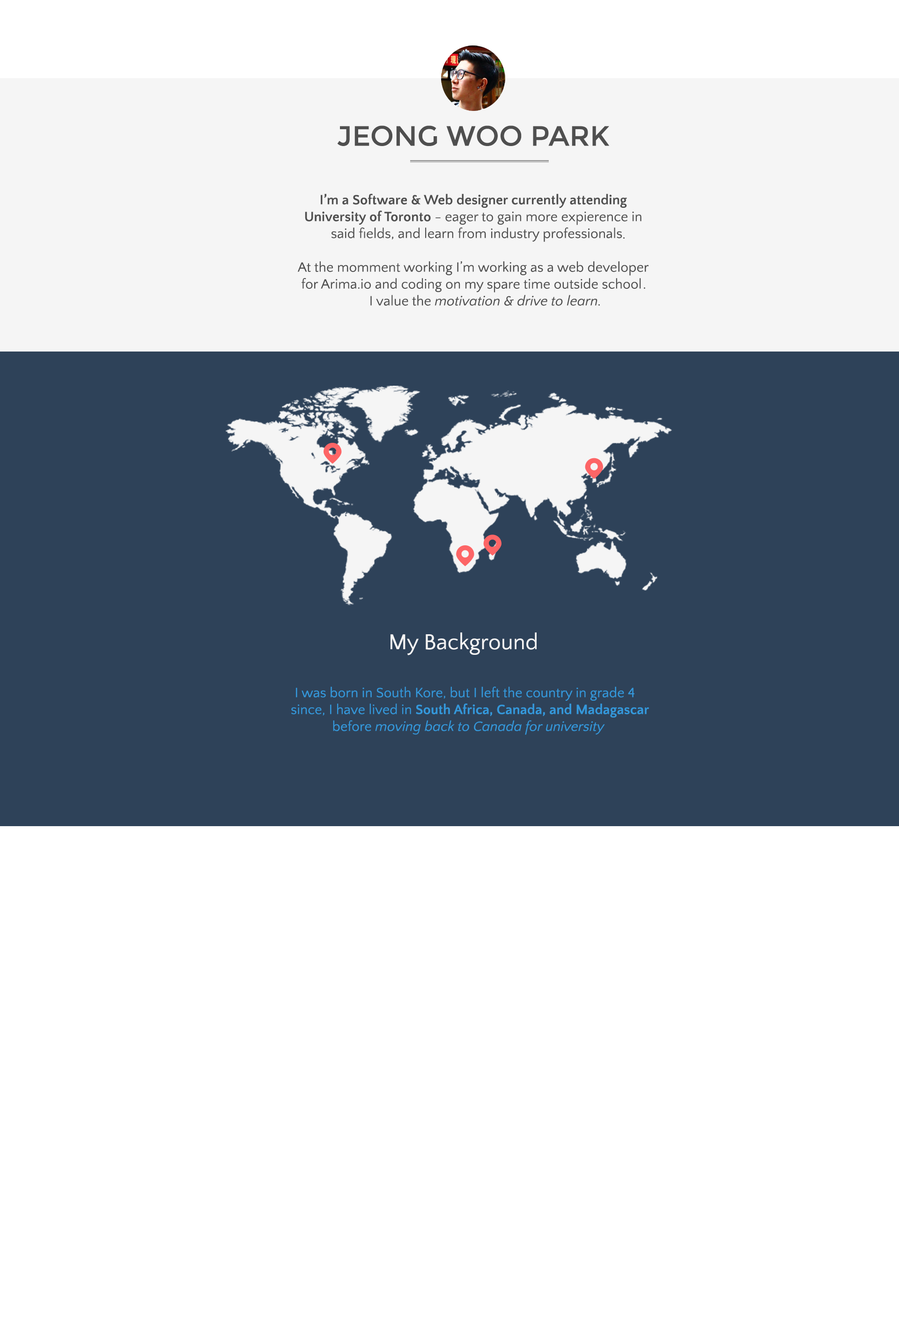
<style>
.page{position:relative;width:899px;height:1327px;background:#ffffff}
.page>*{position:absolute;margin:0}
.t1{font:28.1px "Montserrat-Regular";color:#4f4f4f}
.t2{font:14px "QuattrocentoSans";color:#4f4f4f}
.t3{font:14px "QuattrocentoSans-Bold";color:#4f4f4f}
.t4{font:14px "QuattrocentoSans-Italic";color:#4f4f4f}
.t5{font:22.5px "QuattrocentoSans";color:#f5f5f5}
.t6{font:14px "QuattrocentoSans";color:#3498db}
.t7{font:14px "QuattrocentoSans-Bold";color:#3498db}
.t8{font:14px "QuattrocentoSans-Italic";color:#3498db}
</style>
<div class="page">
<p class="t1" style="left:337px;top:125px;width:272px;height:21px">JEONG WOO PARK</p>
<p class="t2" style="left:297px;top:194px;width:352px;height:112px;text-align:center"><span class="t3">I’m a Software &amp; Web designer currently attending <br>University of Toronto</span> - eager to gain more expierence in <br>said fields, and learn from industry professionals   <br><br>At the momment working I’m working as a web developer <br>for Arima.io and coding on my spare time outside school<br>I value the <span class="t4">motivation &amp; drive to learn</span></p>
<p class="t2" style="left:623px;top:237px;width:1px;height:2px">.</p>
<p class="t2" style="left:644px;top:287px;width:1px;height:2px">.</p>
<p class="t2" style="left:598px;top:304px;width:2px;height:2px">.</p>
<p class="t5" style="left:390px;top:632px;width:146px;height:23px">My Background</p>
<p class="t6" style="left:291px;top:687px;width:358px;height:48px;text-align:center">I was born in South Kore, but I left the country in grade 4<br>since, I have lived in <span class="t7">South Africa, Canada, and Madagascar <br></span>before <span class="t8">moving back to Canada for university</span></p>
</div>
